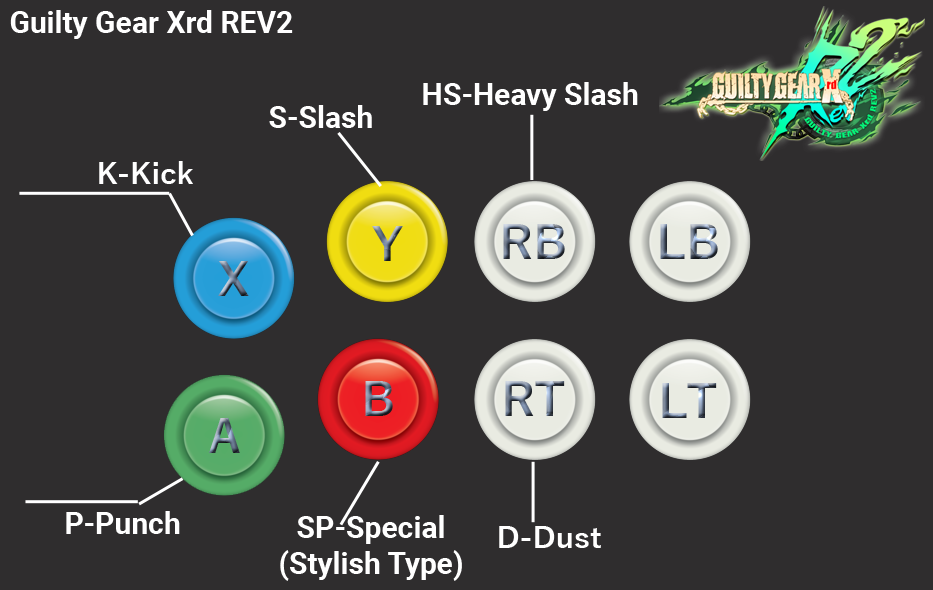
<style>
.page{position:relative;width:933px;height:590px;background:#2f2d2e}
.page>*{position:absolute;margin:0}
.t1{font:30px "Roboto-Bold";color:#ffffff}
.t2{font:30px "YuGothic-Bold";color:#ffffff}
.t3{font:30px/36px "Roboto-Bold";color:#ffffff}
</style>
<div class="page">
<p class="t1" style="left:10px;top:10px;width:283px;height:29px">Guilty Gear Xrd REV2</p>
<p class="t1" style="left:423px;top:82px;width:215px;height:29px">HS-Heavy Slash</p>
<p class="t1" style="left:269px;top:105px;width:103px;height:23px">S-Slash</p>
<p class="t2" style="left:99px;top:161px;width:94px;height:23px">K-Kick</p>
<p class="t1" style="left:66px;top:511px;width:114px;height:23px">P-Punch</p>
<p class="t3" style="left:280px;top:515px;width:182px;height:66px;text-align:center">SP-Special<br>(Stylish Type)</p>
<p class="t2" style="left:499px;top:526px;width:102px;height:22px">D-Dust</p>
</div>
